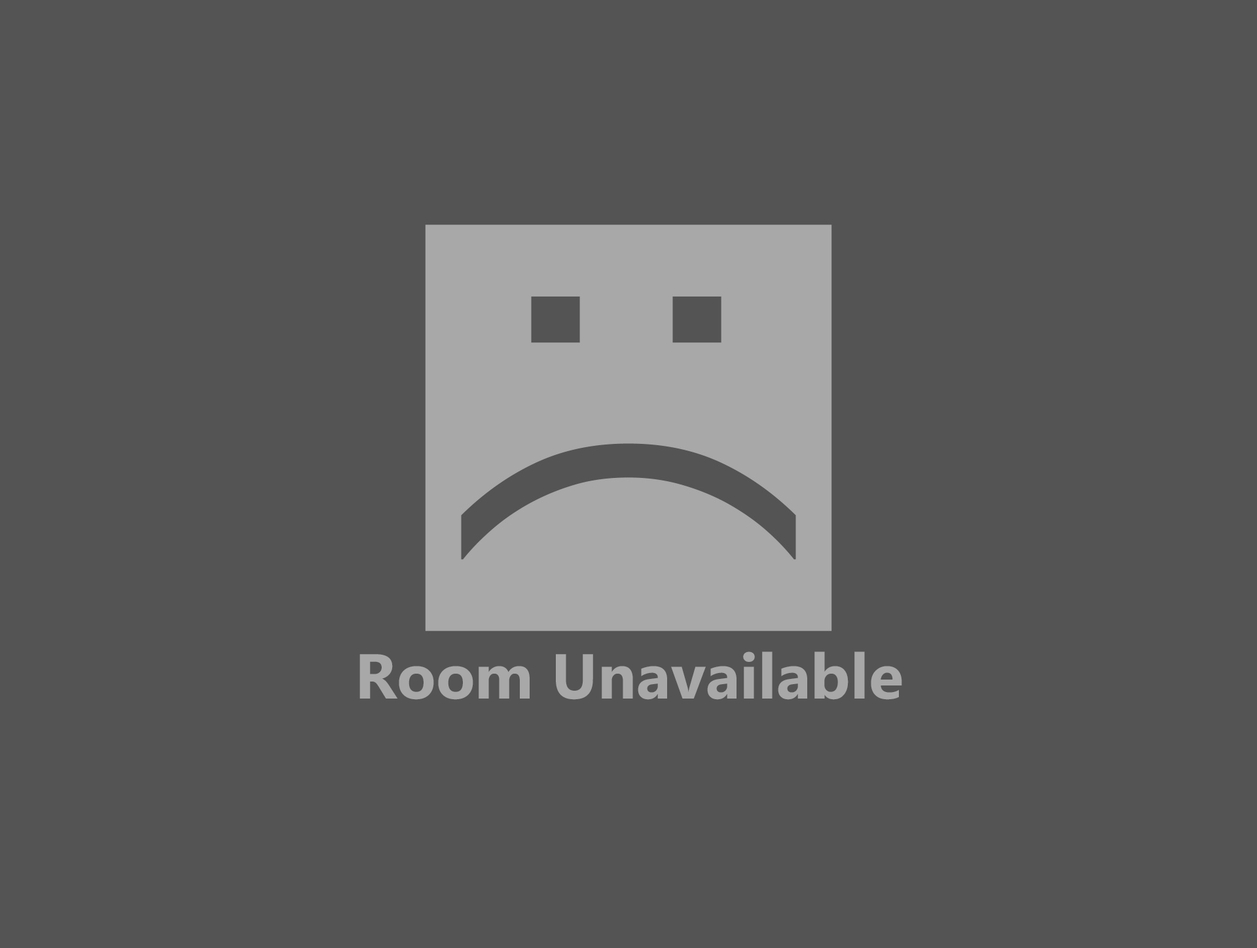
<style>
.page{position:relative;width:1257px;height:948px;background:#545454}
.page>*{position:absolute;margin:0}
.t1{font:63.4px "Ebrima-Bold";color:#a8a8a8}
</style>
<div class="page">
<p class="t1" style="left:360px;top:652px;width:542px;height:48px">Room Unavailable</p>
</div>
